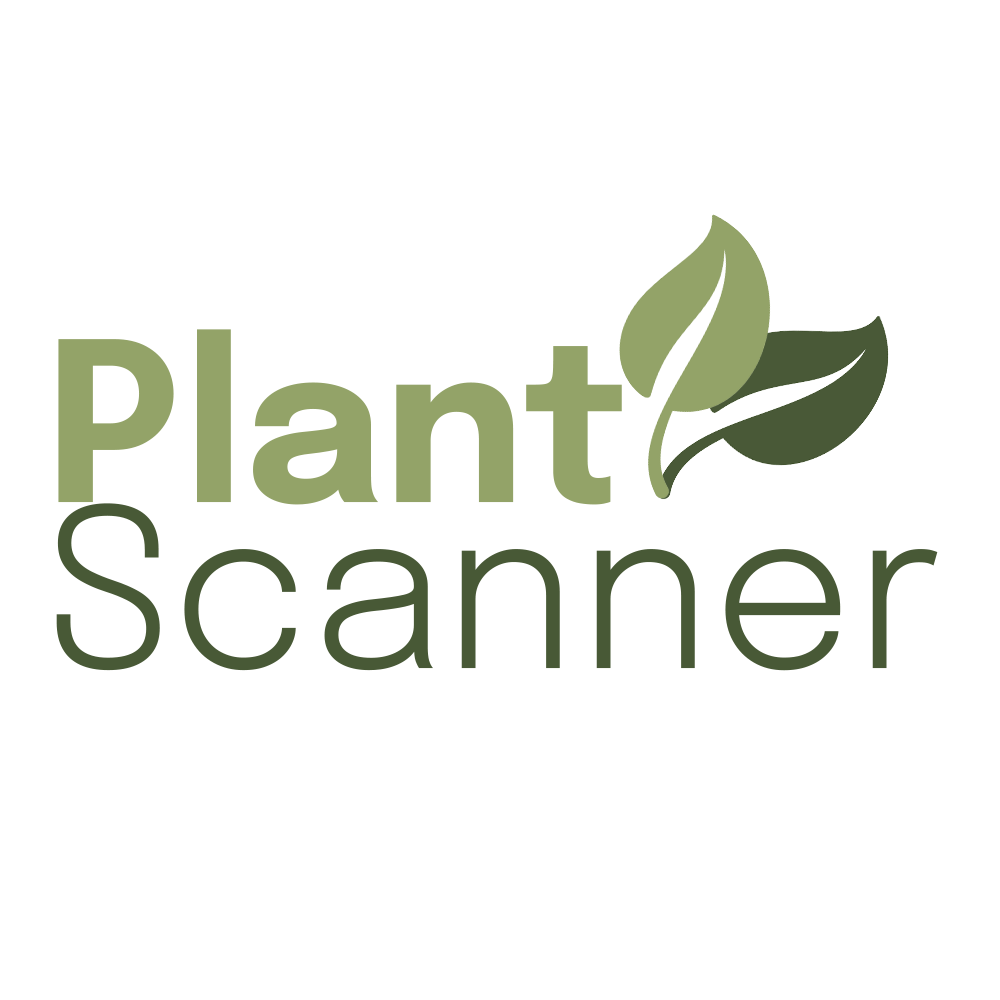
<style>
.page{position:relative;width:1000px;height:1000px;background:#ffffff}
.page>*{position:absolute;margin:0}
.t1{font:220.8px/166.7px "Epilogue-Light";color:#485936}
.t2{font:220.8px/166.7px "Epilogue-Bold";color:#93a368}
</style>
<div class="page">
<p class="t1" style="left:56px;top:329px;width:882px;height:342px"><span class="t2">Plant<br></span>Scanner</p>
</div>
